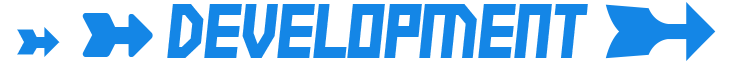
<style>
.page{position:relative;width:736px;height:61px;background:#ffffff}
.page>*{position:absolute;margin:0}
.t1{font:75px "ElectricBoots";color:#1486e6}
.t2{font:150px "SoftOrnamentsFourteen";color:#1486e6}
.t3{font:120px "SoftOrnamentsFourteen";color:#1486e6}
.t4{font:75px "SoftOrnamentsFourteen";color:#1486e6}
</style>
<div class="page">
<p class="t1" style="left:167px;top:4px;width:421px;height:54px">development</p>
<p class="t2" style="left:605px;top:2px;width:111px;height:59px">6</p>
<p class="t3" style="left:82px;top:13px;width:71px;height:44px">Z</p>
<p class="t4" style="left:17px;top:27px;width:43px;height:30px">w</p>
</div>
